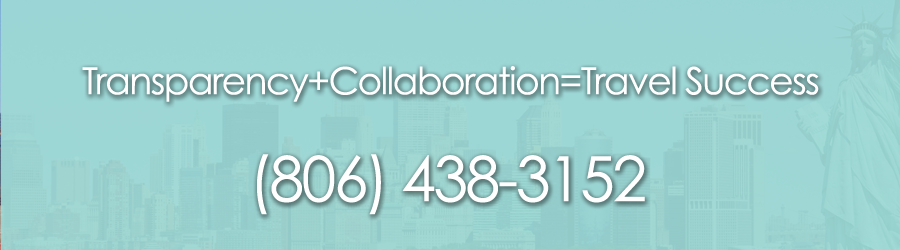
<style>
.page{position:relative;width:900px;height:250px}
.page>*{position:absolute;margin:0}
.t1{font:37.5px "CenturyGothic";letter-spacing:-0.04em;color:#ffffff}
.t2{font:62.5px "CenturyGothic";letter-spacing:-0.04em;color:#ffffff}
</style>
<div class="page">
<p class="t1" style="left:82px;top:66px;width:737px;height:36px">Transparency+Collaboration=Travel Success</p>
<p class="t2" style="left:257px;top:154px;width:388px;height:61px">(806) 438-3152</p>
</div>
